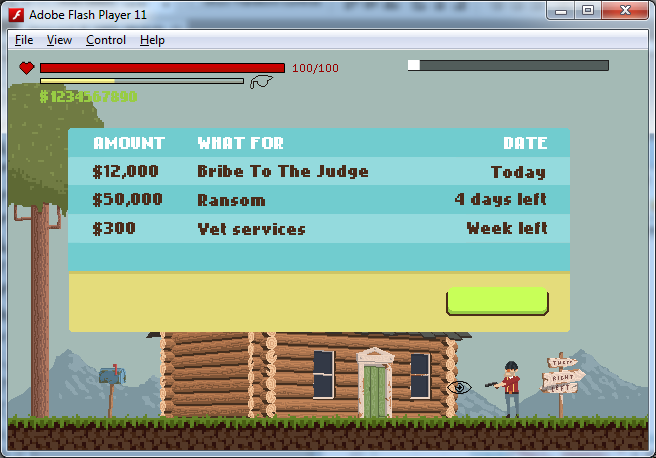
<style>
.page{position:relative;width:656px;height:458px;background:#a4bab5}
.page>*{position:absolute;margin:0}
.t1{font:14px "NokiaCellphoneFC-Small";color:#ffffff}
.t2{font:14px "NokiaCellphoneFC-Small";color:#4b2c1a}
</style>
<div class="page">
<p class="t1" style="left:94px;top:137px;width:71px;height:12px">AMOUNT</p>
<p class="t1" style="left:198px;top:137px;width:85px;height:12px">WHAT FOR</p>
<p class="t1" style="left:504px;top:137px;width:43px;height:12px">DATE</p>
<p class="t2" style="left:93px;top:165px;width:65px;height:14px">$12,000</p>
<p class="t2" style="left:198px;top:165px;width:170px;height:14px">Bribe To The Judge</p>
<p class="t2" style="left:491px;top:166px;width:54px;height:14px">Today</p>
<p class="t2" style="left:93px;top:193px;width:69px;height:14px">$50,000</p>
<p class="t2" style="left:198px;top:194px;width:67px;height:12px">Ransom</p>
<p class="t2" style="left:455px;top:193px;width:91px;height:14px">4 days left</p>
<p class="t2" style="left:93px;top:222px;width:42px;height:14px">$300</p>
<p class="t2" style="left:467px;top:222px;width:80px;height:12px">Week left</p>
<p class="t2" style="left:198px;top:223px;width:107px;height:12px">Vet services</p>
</div>
